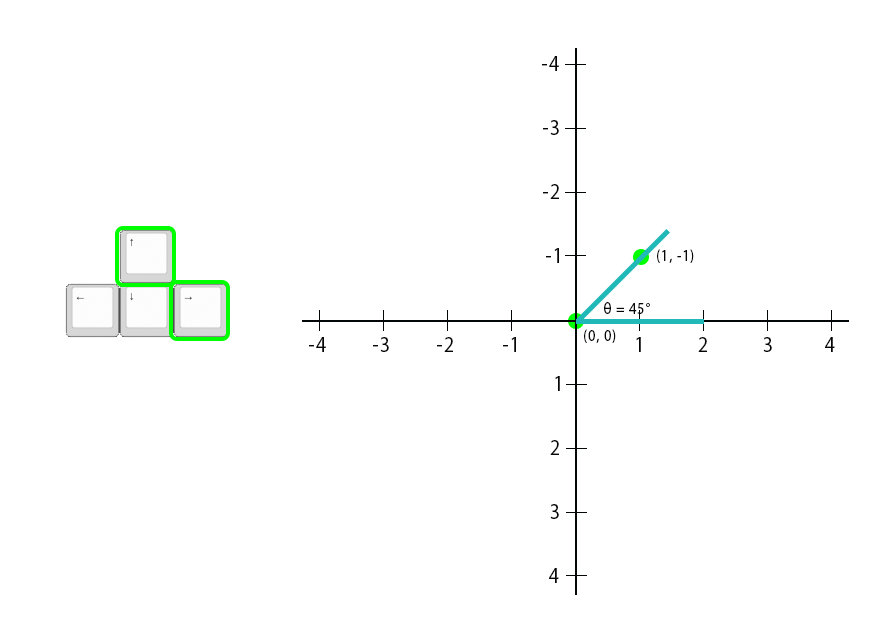
<style>
.page{position:relative;width:896px;height:640px;background:#ffffff}
.page>*{position:absolute;margin:0}
.t1{font:22.5px "MyriadPro-Regular";letter-spacing:0.06em;color:#060606;scale:0.88 1}
.t2{font:16.2px "MyriadPro-Regular";letter-spacing:0.06em;color:#060606;scale:0.88 1}
.t3{font:16px "MyriadPro-Regular";letter-spacing:0.06em;color:#060606;scale:0.88 1}
</style>
<div class="page">
<p class="t1" style="left:542px;top:56px;width:17px;height:15px">-4</p>
<p class="t1" style="left:543px;top:120px;width:16px;height:15px">-3</p>
<p class="t1" style="left:543px;top:184px;width:16px;height:15px">-2</p>
<p class="t1" style="left:546px;top:248px;width:13px;height:15px">-1</p>
<p class="t2" style="left:657px;top:249px;width:37px;height:14px">(1, -1)</p>
<p class="t3" style="left:604px;top:302px;width:46px;height:12px">θ = 45°</p>
<p class="t2" style="left:584px;top:329px;width:32px;height:14px">(0, 0)</p>
<p class="t1" style="left:309px;top:337px;width:17px;height:15px">-4</p>
<p class="t1" style="left:373px;top:337px;width:16px;height:15px">-3</p>
<p class="t1" style="left:437px;top:337px;width:16px;height:15px">-2</p>
<p class="t1" style="left:503px;top:337px;width:13px;height:15px">-1</p>
<p class="t1" style="left:636px;top:337px;width:5px;height:15px">1</p>
<p class="t1" style="left:698px;top:337px;width:9px;height:15px">2</p>
<p class="t1" style="left:763px;top:337px;width:9px;height:15px">3</p>
<p class="t1" style="left:825px;top:337px;width:10px;height:15px">4</p>
<p class="t1" style="left:555px;top:376px;width:5px;height:15px">1</p>
<p class="t1" style="left:550px;top:440px;width:9px;height:15px">2</p>
<p class="t1" style="left:550px;top:504px;width:9px;height:15px">3</p>
<p class="t1" style="left:549px;top:568px;width:10px;height:15px">4</p>
</div>
